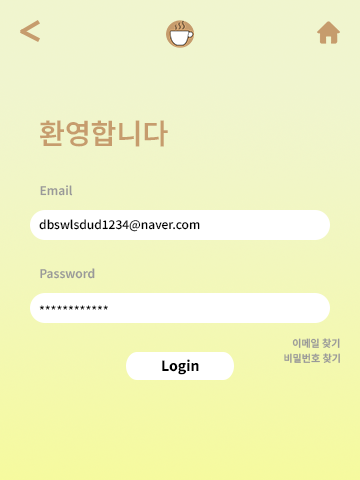
<style>
.page{position:relative;width:360px;height:480px}
.page>*{position:absolute;margin:0}
.t1{font:28px "NotoSansKR-SemiBold";color:#c69c6d}
.t2{font:12px "NotoSansKR-SemiBold";color:#999999}
.t3{font:12px "NotoSansKR-Medium";color:#000000}
.t4{font:10px "NotoSansKR-SemiBold";color:#999999}
.t5{font:14px "NotoSansKR-ExtraBold";color:#000000}
</style>
<div class="page">
<p class="t1" style="left:40px;top:120px;width:128px;height:27px">환영합니다</p>
<p class="t2" style="left:40px;top:185px;width:33px;height:11px">Email</p>
<p class="t3" style="left:39px;top:219px;width:161px;height:13px">dbswlsdud1234@naver.com</p>
<p class="t2" style="left:40px;top:268px;width:55px;height:11px">Password</p>
<p class="t3" style="left:39px;top:305px;width:69px;height:5px">************</p>
<p class="t4" style="left:292px;top:338px;width:48px;height:10px">이메일 찾기</p>
<p class="t4" style="left:284px;top:353px;width:56px;height:10px">비밀번호 찾기</p>
<p class="t5" style="left:162px;top:359px;width:37px;height:16px">Login</p>
</div>
